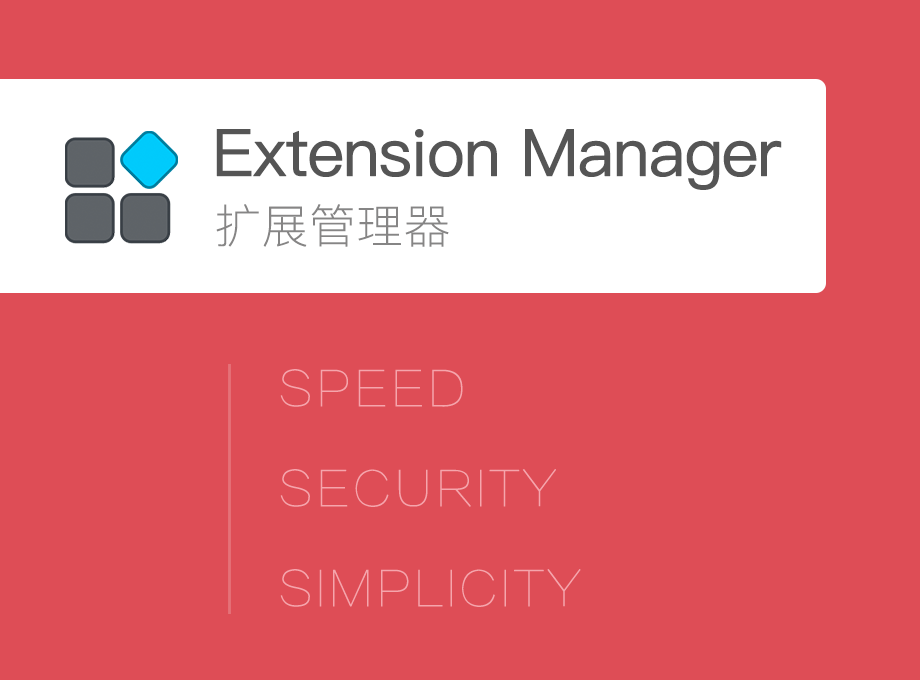
<style>
.page{position:relative;width:920px;height:680px;background:#de4d56}
.page>*{position:absolute;margin:0}
.t1{font:65.3px "PingFangSC-Regular";letter-spacing:-0.04em;color:#555555;font-weight:bold}
.t2{font:46.1px "PingFangSC-Thin";color:#868585;font-weight:bold}
.t3{font:48px/100px "FZLTCXHJW--GB1-0";color:#f5a5ac;font-weight:bold}
</style>
<div class="page">
<p class="t1" style="left:216px;top:129px;width:566px;height:61px">Extension Manager</p>
<p class="t2" style="left:216px;top:204px;width:233px;height:43px">扩展管理器</p>
<p class="t3" style="left:280px;top:369px;width:301px;height:238px">SPEED<br>SECURITY<br>SIMPLICITY</p>
</div>
